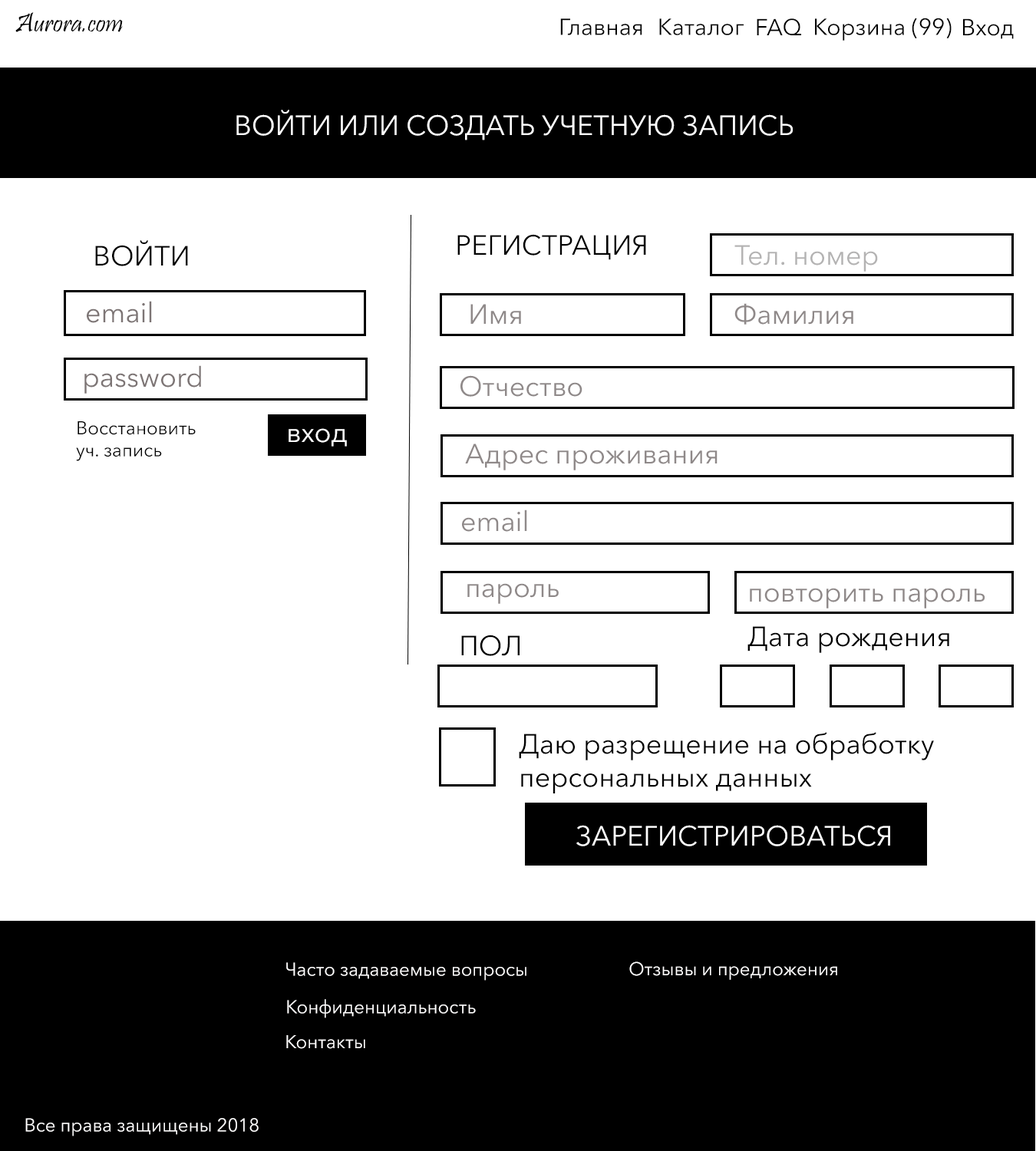
<style>
.page{position:relative;width:1036px;height:1151px;background:#ffffff}
.page>*{position:absolute;margin:0}
.t1{font:27.6px "Pristina-Regular";color:#000000}
.t2{font:23px "AvenirNextCyr-Regular";color:#000000}
.t3{font:27.6px "AvenirNextCyr-Regular";color:#ffffff}
.t4{font:27.6px "AvenirNextCyr-Regular";color:#000000}
.t5{font:27.6px "AvenirNextCyr-Regular";color:#b4b3b3}
.t6{font:27.6px "AvenirNextCyr-Regular";color:#7d7575}
.t7{font:27.6px "AvenirNextCyr-Regular";color:#8f8989}
.t8{font:18.4px "AvenirNextCyr-Regular";color:#000000}
.t9{font:18.4px "AvenirNextCyr-Regular";color:#fffefe}
</style>
<div class="page">
<p class="t1" style="left:15px;top:12px;width:108px;height:20px">Aurora.com</p>
<p class="t2" style="left:815px;top:18px;width:137px;height:23px">Корзина (99)</p>
<p class="t2" style="left:560px;top:18px;width:82px;height:17px">Главная</p>
<p class="t2" style="left:659px;top:18px;width:85px;height:17px">Каталог</p>
<p class="t2" style="left:757px;top:18px;width:44px;height:17px">FAQ</p>
<p class="t2" style="left:963px;top:18px;width:51px;height:21px">Вход</p>
<p class="t3" style="left:236px;top:110px;width:557px;height:30px">ВОЙТИ ИЛИ СОЗДАТЬ УЧЕТНУЮ ЗАПИСЬ</p>
<p class="t4" style="left:95px;top:240px;width:93px;height:26px">ВОЙТИ</p>
<p class="t4" style="left:457px;top:234px;width:189px;height:26px">РЕГИСТРАЦИЯ</p>
<p class="t5" style="left:734px;top:245px;width:144px;height:27px">Тел. номер</p>
<p class="t6" style="left:87px;top:301px;width:65px;height:22px">email</p>
<p class="t7" style="left:470px;top:304px;width:51px;height:20px">Имя</p>
<p class="t7" style="left:734px;top:303px;width:119px;height:22px">Фамилия</p>
<p class="t6" style="left:84px;top:365px;width:117px;height:29px">password</p>
<p class="t7" style="left:460px;top:375px;width:122px;height:22px">Отчество</p>
<p class="t8" style="left:76px;top:421px;width:120px;height:40px;text-align:right">Восстановить<br>уч. запись</p>
<p class="t3" style="left:289px;top:428px;width:58px;height:19px">вход</p>
<p class="t7" style="left:465px;top:444px;width:252px;height:26px">Адрес проживания</p>
<p class="t7" style="left:462px;top:510px;width:65px;height:22px">email</p>
<p class="t7" style="left:467px;top:583px;width:92px;height:21px">пароль</p>
<p class="t7" style="left:750px;top:588px;width:235px;height:21px">повторить пароль</p>
<p class="t4" style="left:747px;top:626px;width:202px;height:27px">Дата рождения</p>
<p class="t4" style="left:461px;top:635px;width:59px;height:21px">ПОЛ</p>
<p class="t4" style="left:519px;top:732px;width:415px;height:61px;text-align:right">Даю разрещение на обработку<br>персональных данных</p>
<p class="t3" style="left:576px;top:825px;width:314px;height:21px">ЗАРЕГИСТРИРОВАТЬСЯ</p>
<p class="t9" style="left:286px;top:962px;width:240px;height:19px">Часто задаваемые вопросы</p>
<p class="t9" style="left:629px;top:962px;width:208px;height:18px">Отзывы и предложения</p>
<p class="t9" style="left:287px;top:999px;width:189px;height:19px">Конфиденциальность</p>
<p class="t9" style="left:286px;top:1035px;width:79px;height:14px">Контакты</p>
<p class="t9" style="left:25px;top:1118px;width:234px;height:18px">Все права защищены 2018</p>
</div>
